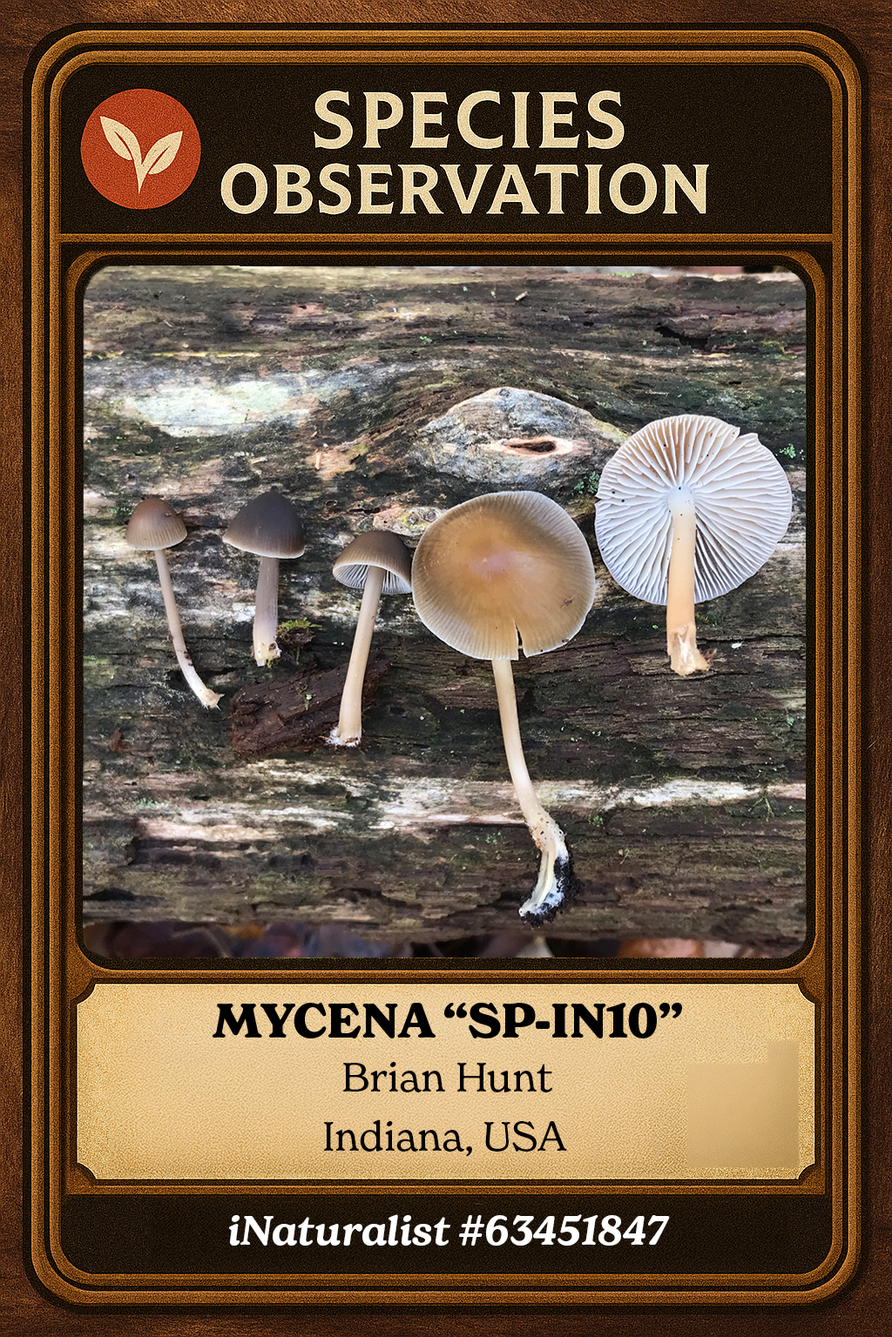
<style>
.page{position:relative;width:892px;height:1337px}
.page>*{position:absolute;margin:0}
.t1{font:47px "NewSpirit-Bold";color:#000000}
.t2{font:40.1px "NewSpirit-Regular";color:#000000}
.t3{font:40.1px "NewSpirit-SemiBoldItalic";color:#ffffff}
</style>
<div class="page">
<p class="t1" style="left:212px;top:1003px;width:470px;height:36px">MYCENA “SP-IN10”</p>
<p class="t2" style="left:343px;top:1062px;width:209px;height:31px">Brian Hunt</p>
<p class="t2" style="left:324px;top:1120px;width:243px;height:37px">Indiana, USA</p>
<p class="t3" style="left:229px;top:1215px;width:441px;height:31px">iNaturalist #63451847</p>
</div>
